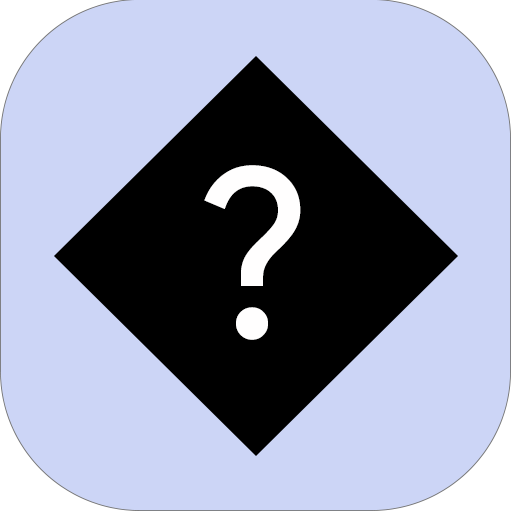
<style>
.page{position:relative;width:512px;height:512px;background:#ccd5f6}
.page>*{position:absolute;margin:0}
.t1{font:236px "ProductSans-Regular";color:#fffefe}
</style>
<div class="page">
<p class="t1" style="left:204px;top:165px;width:97px;height:175px">?</p>
</div>
